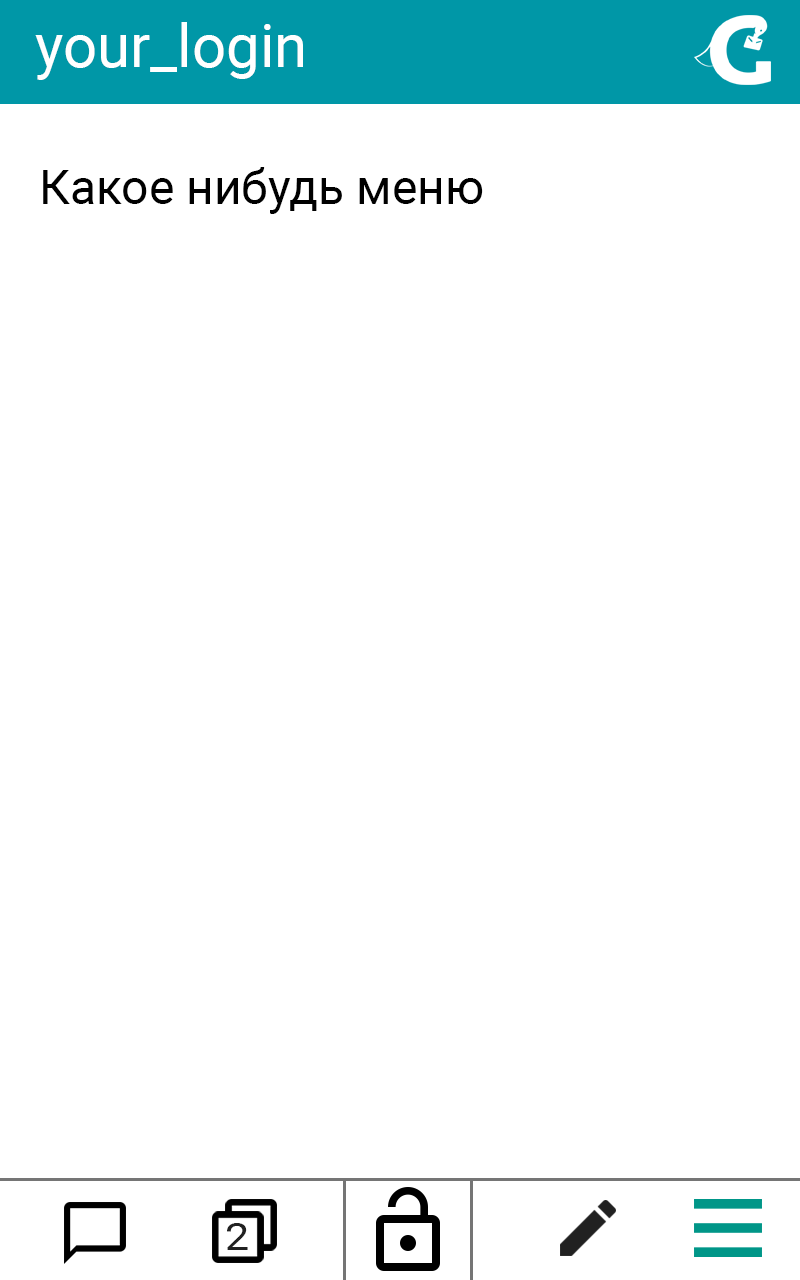
<style>
.page{position:relative;width:800px;height:1280px;background:#ffffff}
.page>*{position:absolute;margin:0}
.t1{font:60px "Roboto-Regular";color:#ffffff}
.t2{font:48px "Roboto-Regular";color:#000000}
.t3{font:37.5px "Roboto-Regular";color:#212121;scale:1.16 1}
</style>
<div class="page">
<p class="t1" style="left:35px;top:22px;width:268px;height:58px">your_login</p>
<p class="t2" style="left:43px;top:167px;width:440px;height:47px">Какое нибудь меню</p>
<p class="t3" style="left:227px;top:1223px;width:21px;height:27px">2</p>
</div>
